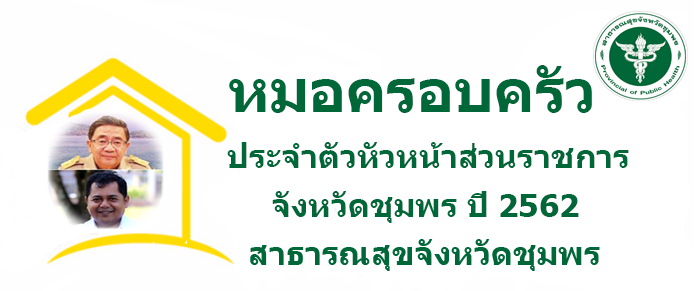
<style>
.page{position:relative;width:698px;height:291px;background:#ffffff}
.page>*{position:absolute;margin:0}
.t1{font:58.7px "Tahoma-Bold";color:#006838}
.t2{font:32px "Tahoma-Bold";color:#006838}
</style>
<div class="page">
<p class="t1" style="left:229px;top:65px;width:363px;height:48px">หมอครอบครัว</p>
<p class="t2" style="left:227px;top:142px;width:402px;height:26px">ประจำตัวหัวหน้าส่วนราชการ</p>
<p class="t2" style="left:272px;top:191px;width:307px;height:32px">จังหวัดชุมพร ปี 2562</p>
</div>
